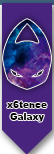
<style>
.page{position:relative;width:54px;height:154px;background:#48247f}
.page>*{position:absolute;margin:0}
.t1{font:9.2px "Arial-Black";letter-spacing:-0.01em;color:#000000}
</style>
<div class="page">
<p class="t1" style="left:7px;top:101px;width:40px;height:7px">x6tence</p>
<p class="t1" style="left:10px;top:113px;width:34px;height:9px">Galaxy</p>
</div>
